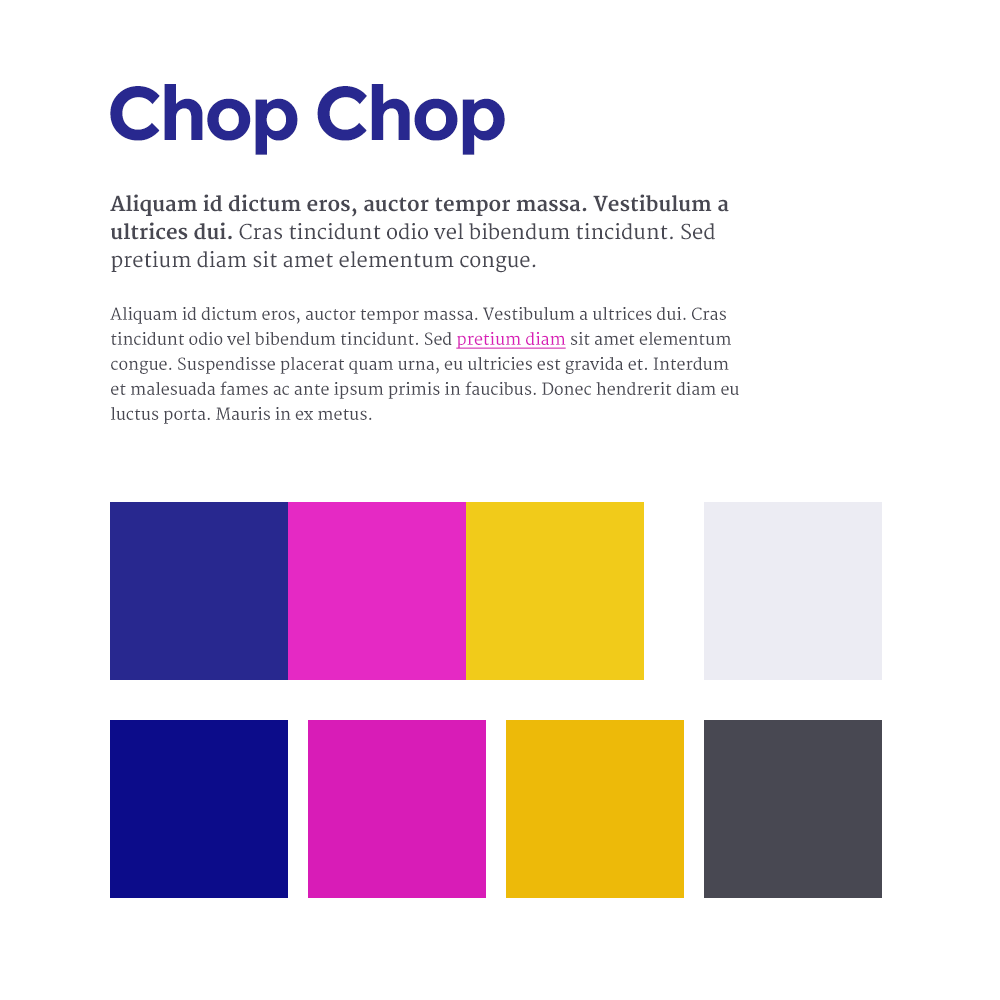
<style>
.page{position:relative;width:1000px;height:1000px;background:#ffffff}
.page>*{position:absolute;margin:0}
.t1{font:75.4px "Montserrat-Bold";letter-spacing:-0.04em;color:#28288f}
.t2{font:20px/28px "Merriweather";color:#484852}
.t3{font:20px/28px "Merriweather-Bold";color:#484852}
.t4{font:16px/25px "Merriweather";color:#484852}
.t5{font:16px/25px "Merriweather";color:#d81cb7;text-decoration:underline}
</style>
<div class="page">
<p class="t1" style="left:110px;top:84px;width:395px;height:71px">Chop Chop</p>
<p class="t2" style="left:110px;top:194px;width:619px;height:79px"><span class="t3">Aliquam id dictum eros, auctor tempor massa. Vestibulum a ultrices dui.</span> Cras tincidunt odio vel bibendum tincidunt. Sed pretium diam sit amet elementum congue.</p>
<p class="t4" style="left:110px;top:307px;width:629px;height:117px">Aliquam id dictum eros, auctor tempor massa. Vestibulum a ultrices dui. Cras tincidunt odio vel bibendum tincidunt. Sed <span class="t5">pretium diam</span> sit amet elementum congue. Suspendisse placerat quam urna, eu ultricies est gravida et. Interdum et malesuada fames ac ante ipsum primis in faucibus. Donec hendrerit diam eu luctus porta. Mauris in ex metus.</p>
</div>
